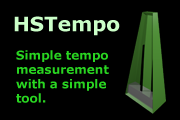
<style>
.page{position:relative;width:180px;height:120px;background:#000000}
.page>*{position:absolute;margin:0}
.t1{font:20px "Verdana-Bold";color:#cbffc8}
.t2{font:12px "Verdana-Bold";color:#29d521}
</style>
<div class="page">
<p class="t1" style="left:14px;top:16px;width:106px;height:20px">HSTempo</p>
<p class="t2" style="left:16px;top:50px;width:93px;height:53px">Simple tempo<br>measurement<br>with a simple<br>tool.</p>
</div>
